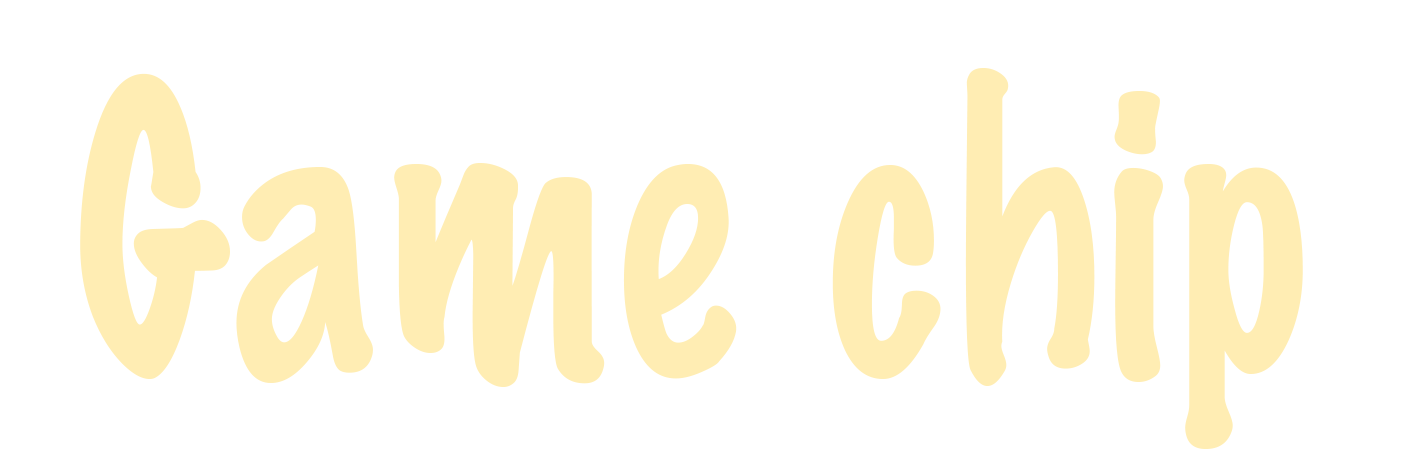
<style>
.page{position:relative;width:1417px;height:472px;background:#ffffff}
.page>*{position:absolute;margin:0}
.t1{font:363.4px "MarkerFelt-Thin";letter-spacing:0.025em;color:#ffedb3;scale:0.85 1}
</style>
<div class="page">
<p class="t1" style="left:80px;top:68px;width:1223px;height:381px">Game chip</p>
</div>
